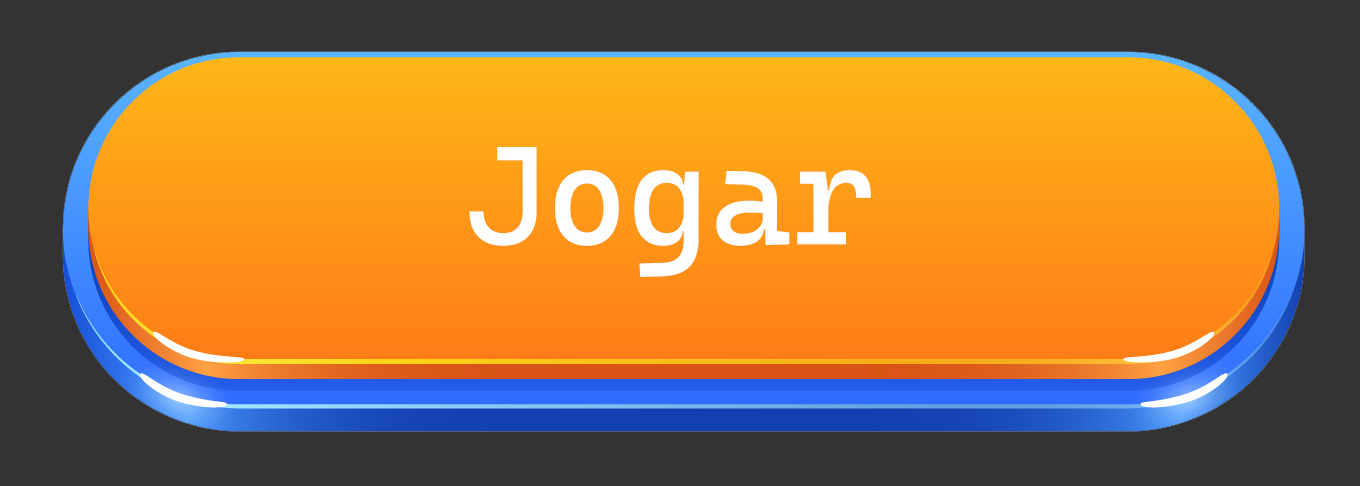
<style>
.page{position:relative;width:1360px;height:486px;background:#333333}
.page>*{position:absolute;margin:0}
.t1{font:140px "CascadiaCode-Roman";color:#fefefe}
</style>
<div class="page">
<p class="t1" style="left:469px;top:147px;width:402px;height:130px">Jogar</p>
</div>
